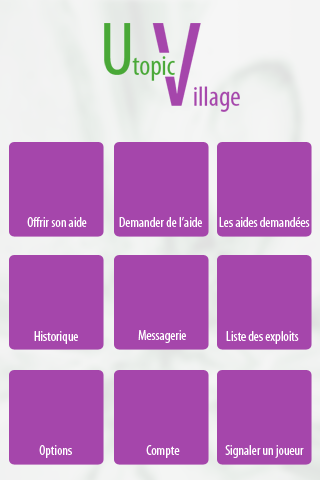
<style>
.page{position:relative;width:320px;height:480px;background:#a546ab}
.page>*{position:absolute;margin:0}
.t1{font:14px "MyriadPro-Cond";color:#ffffff}
</style>
<div class="page">
<p class="t1" style="left:27px;top:217px;width:60px;height:10px">Offrir son aide</p>
<p class="t1" style="left:119px;top:216px;width:83px;height:11px">Demander de l’aide</p>
<p class="t1" style="left:219px;top:217px;width:91px;height:10px">Les aides demandées</p>
<p class="t1" style="left:34px;top:331px;width:44px;height:13px">Historique</p>
<p class="t1" style="left:138px;top:330px;width:48px;height:13px">Messagerie</p>
<p class="t1" style="left:226px;top:331px;width:73px;height:13px">Liste des exploits</p>
<p class="t1" style="left:39px;top:445px;width:33px;height:13px">Options</p>
<p class="t1" style="left:146px;top:445px;width:34px;height:13px">Compte</p>
<p class="t1" style="left:225px;top:445px;width:79px;height:13px">Signaler un joueur</p>
</div>
